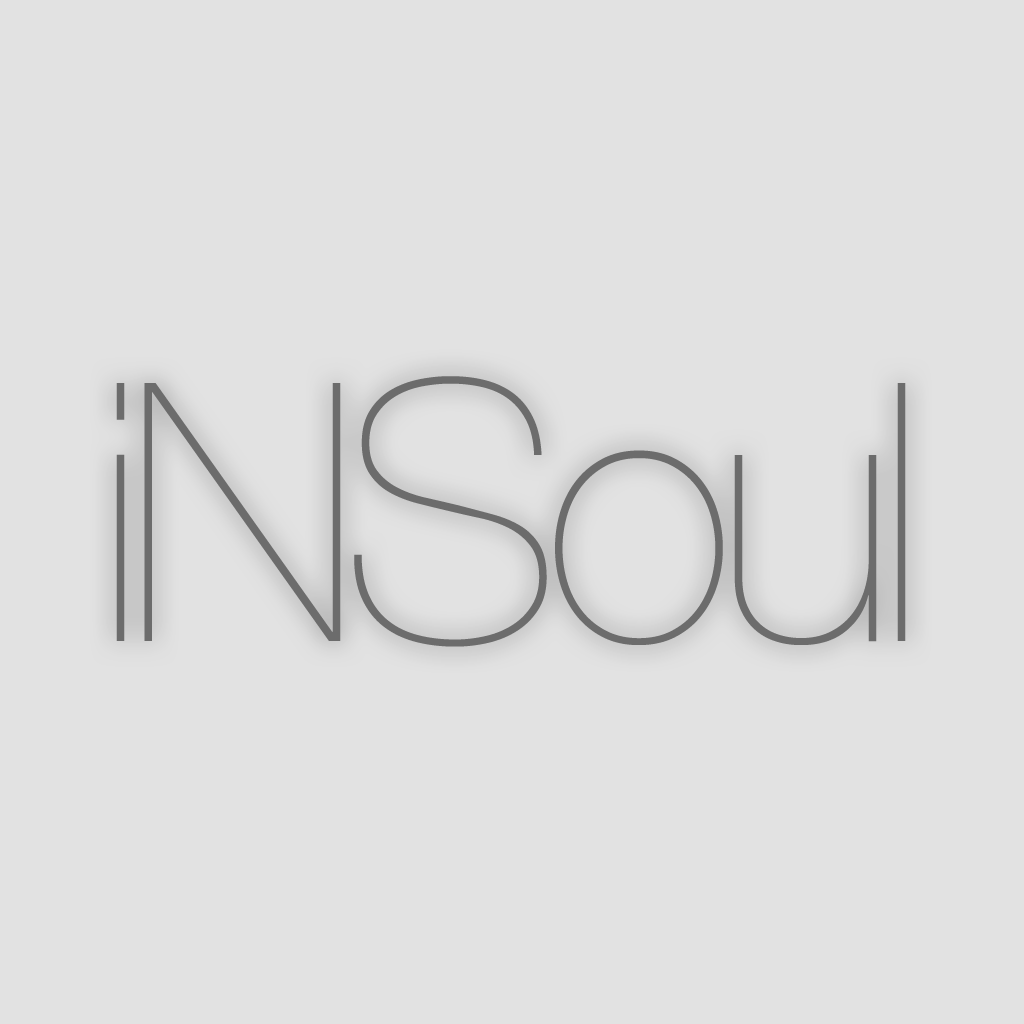
<style>
.page{position:relative;width:1024px;height:1024px;background:#e2e2e2}
.page>*{position:absolute;margin:0}
.t1{font:362px "HelveticaNeue-UltraLight";letter-spacing:-0.05em;color:#6c6c6c}
</style>
<div class="page">
<p class="t1" style="left:116px;top:376px;width:790px;height:271px">iNSoul</p>
</div>
